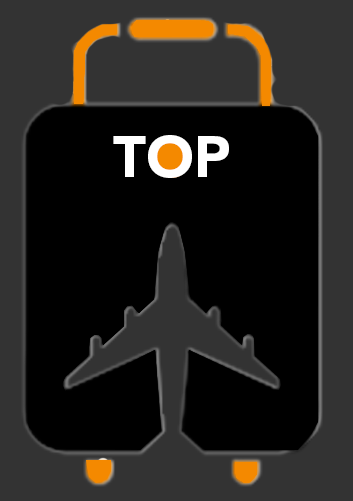
<style>
.page{position:relative;width:353px;height:501px;background:#000000}
.page>*{position:absolute;margin:0}
.t1{font:57.5px "AvenirLTStd-Black";color:#ffffff}
</style>
<div class="page">
<p class="t1" style="left:113px;top:135px;width:116px;height:43px">TOP</p>
</div>
